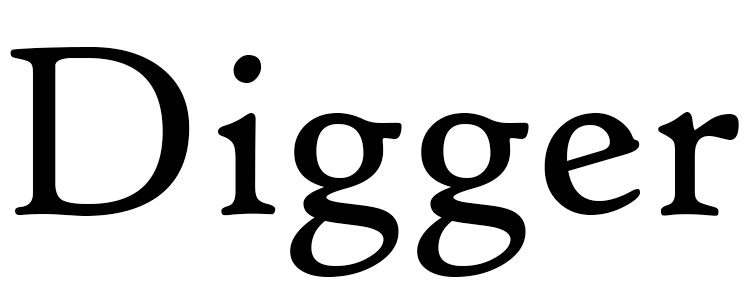
<style>
.page{position:relative;width:750px;height:300px;background:#ffffff}
.page>*{position:absolute;margin:0}
.t1{font:260px "HighTowerText-Reg";color:#000000}
</style>
<div class="page">
<p class="t1" style="left:10px;top:47px;width:729px;height:230px">Digger</p>
</div>
